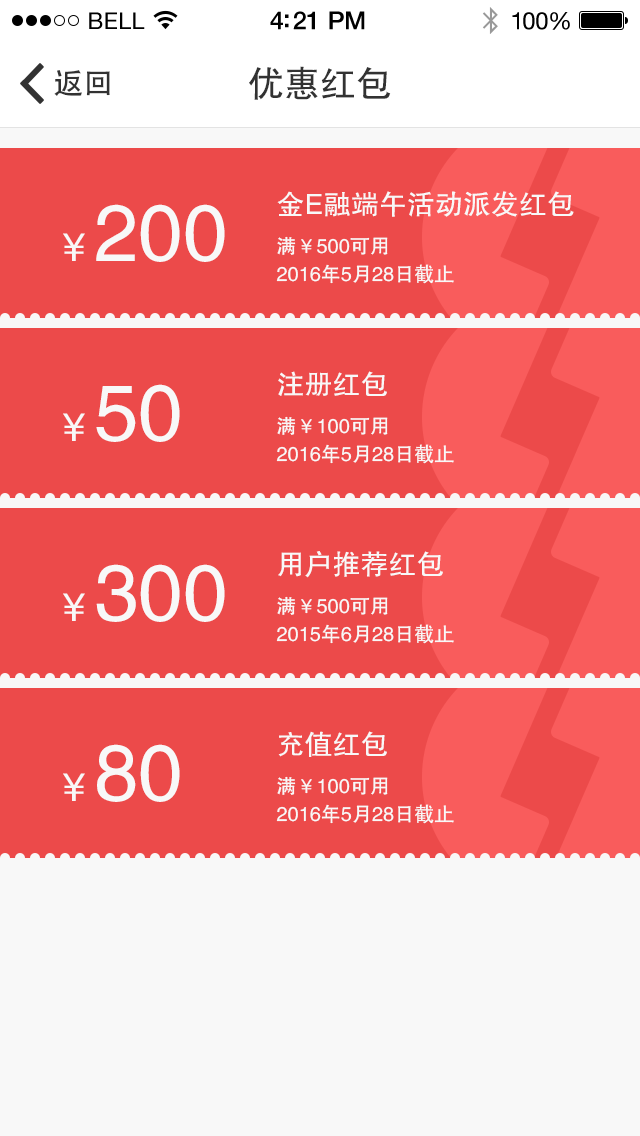
<style>
.page{position:relative;width:640px;height:1136px;background:#ec4a4a}
.page>*{position:absolute;margin:0}
.t1{font:23px "HelveticaNeue";letter-spacing:0.02em;color:#000000}
.t2{font:25px "HelveticaNeue-Medium";letter-spacing:-0.02em;color:#000000}
.t3{font:24px "HelveticaNeue";letter-spacing:-0.02em;color:#010101}
.t4{font:30px "AdobeHeitiStd-Regular";color:#323232}
.t5{font:36px "FZHTJW--GB1-0";color:#323232}
.t6{font:28px "FZHTJW--GB1-0";color:#f8f8f8}
.t7{font:80px "FZHTJW--GB1-0";color:#f8f8f8}
.t8{font:40px "FZHTJW--GB1-0";color:#f8f8f8}
.t9{font:20px "FZHTJW--GB1-0";color:#f8f8f8}
</style>
<div class="page">
<p class="t1" style="left:89px;top:12px;width:56px;height:17px">BELL</p>
<p class="t2" style="left:270px;top:11px;width:95px;height:19px">4:21 PM</p>
<p class="t3" style="left:512px;top:12px;width:58px;height:18px">100%</p>
<p class="t4" style="left:54px;top:70px;width:56px;height:26px">返回</p>
<p class="t5" style="left:249px;top:66px;width:142px;height:34px">优惠红包</p>
<p class="t6" style="left:277px;top:191px;width:297px;height:26px">金E融端午活动派发红包</p>
<p class="t7" style="left:63px;top:204px;width:162px;height:58px"><span class="t8">￥</span>200</p>
<p class="t9" style="left:277px;top:236px;width:111px;height:19px">满￥500可用</p>
<p class="t9" style="left:276px;top:264px;width:178px;height:20px">2016年5月28日截止</p>
<p class="t6" style="left:278px;top:371px;width:109px;height:25px">注册红包</p>
<p class="t7" style="left:63px;top:384px;width:117px;height:58px"><span class="t8">￥</span>50</p>
<p class="t9" style="left:277px;top:416px;width:111px;height:19px">满￥100可用</p>
<p class="t9" style="left:276px;top:444px;width:178px;height:20px">2016年5月28日截止</p>
<p class="t6" style="left:278px;top:551px;width:165px;height:27px">用户推荐红包</p>
<p class="t7" style="left:63px;top:564px;width:162px;height:58px"><span class="t8">￥</span>300</p>
<p class="t9" style="left:277px;top:596px;width:111px;height:19px">满￥500可用</p>
<p class="t9" style="left:276px;top:624px;width:178px;height:20px">2015年6月28日截止</p>
<p class="t6" style="left:278px;top:731px;width:109px;height:26px">充值红包</p>
<p class="t7" style="left:63px;top:744px;width:117px;height:58px"><span class="t8">￥</span>80</p>
<p class="t9" style="left:277px;top:776px;width:111px;height:19px">满￥100可用</p>
<p class="t9" style="left:276px;top:804px;width:178px;height:20px">2016年5月28日截止</p>
</div>
